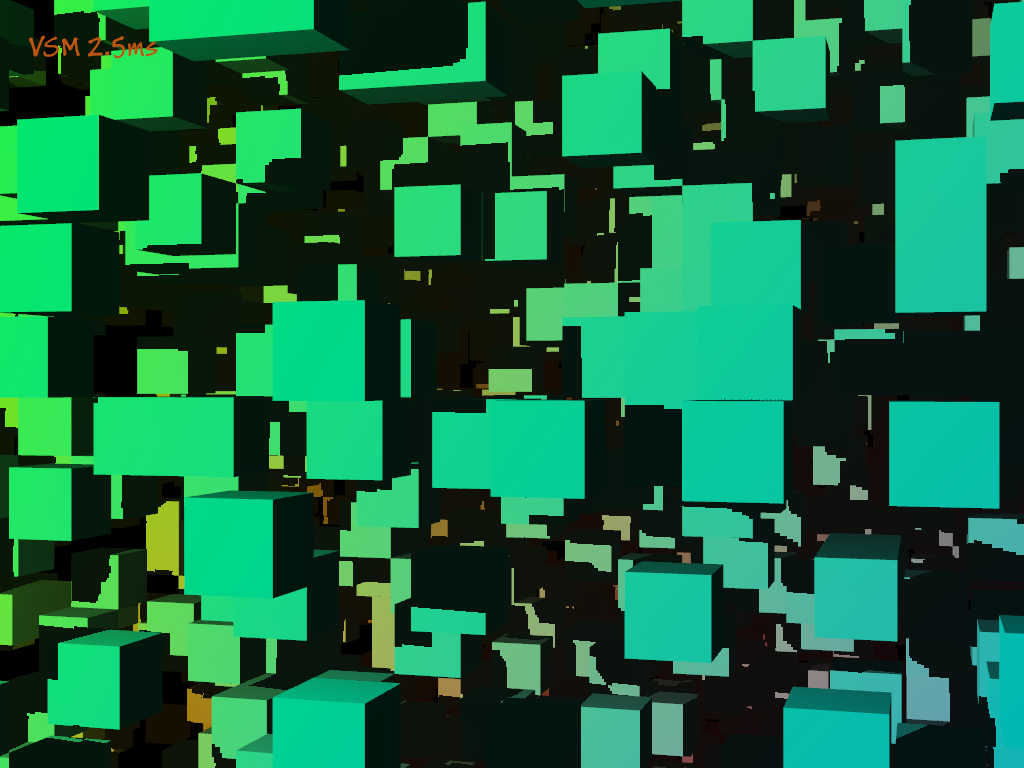
<style>
.page{position:relative;width:1024px;height:768px}
.page>*{position:absolute;margin:0}
.t1{font:30px "BuxtonSketch";letter-spacing:0.01em;color:#ba5512}
</style>
<div class="page">
<p class="t1" style="left:29px;top:35px;width:129px;height:24px">VSM 2.5ms</p>
</div>
